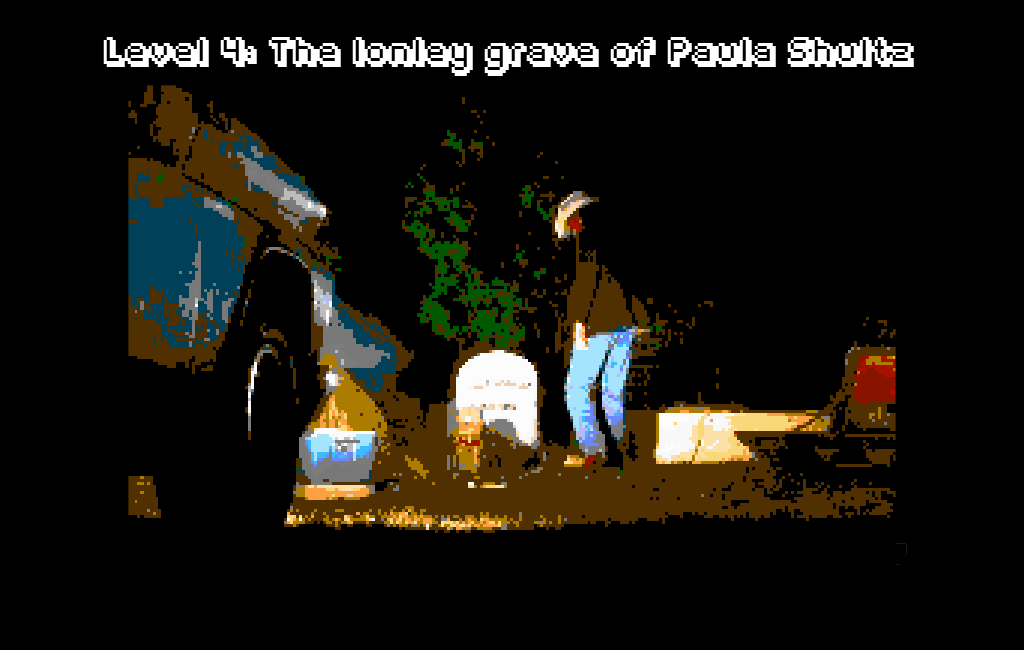
<style>
.page{position:relative;width:1024px;height:650px;background:#000000}
.page>*{position:absolute;margin:0}
.t1{font:24px "Fipps-Regular";color:#ffffff}
</style>
<div class="page">
<p class="t1" style="left:103px;top:37px;width:811px;height:39px">Level 4: The lonley grave of Paula Shultz</p>
</div>
